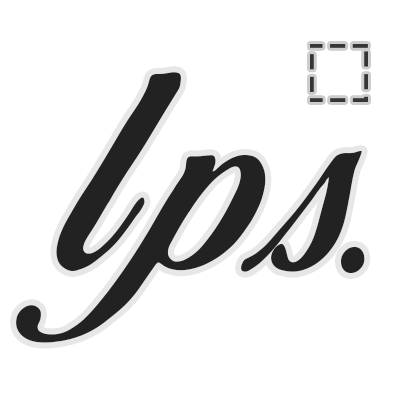
<style>
.page{position:relative;width:400px;height:400px;background:#ffffff}
.page>*{position:absolute;margin:0}
.t1{font:280px "BirdsofParadise";letter-spacing:0.1em;color:#222222}
.t2{font:280px "BirdsofParadise";letter-spacing:-0.025em;color:#222222}
</style>
<div class="page">
<p class="t1" style="left:16px;top:72px;width:349px;height:271px">lp<span class="t2">s</span><span class="t2">.</span></p>
</div>
